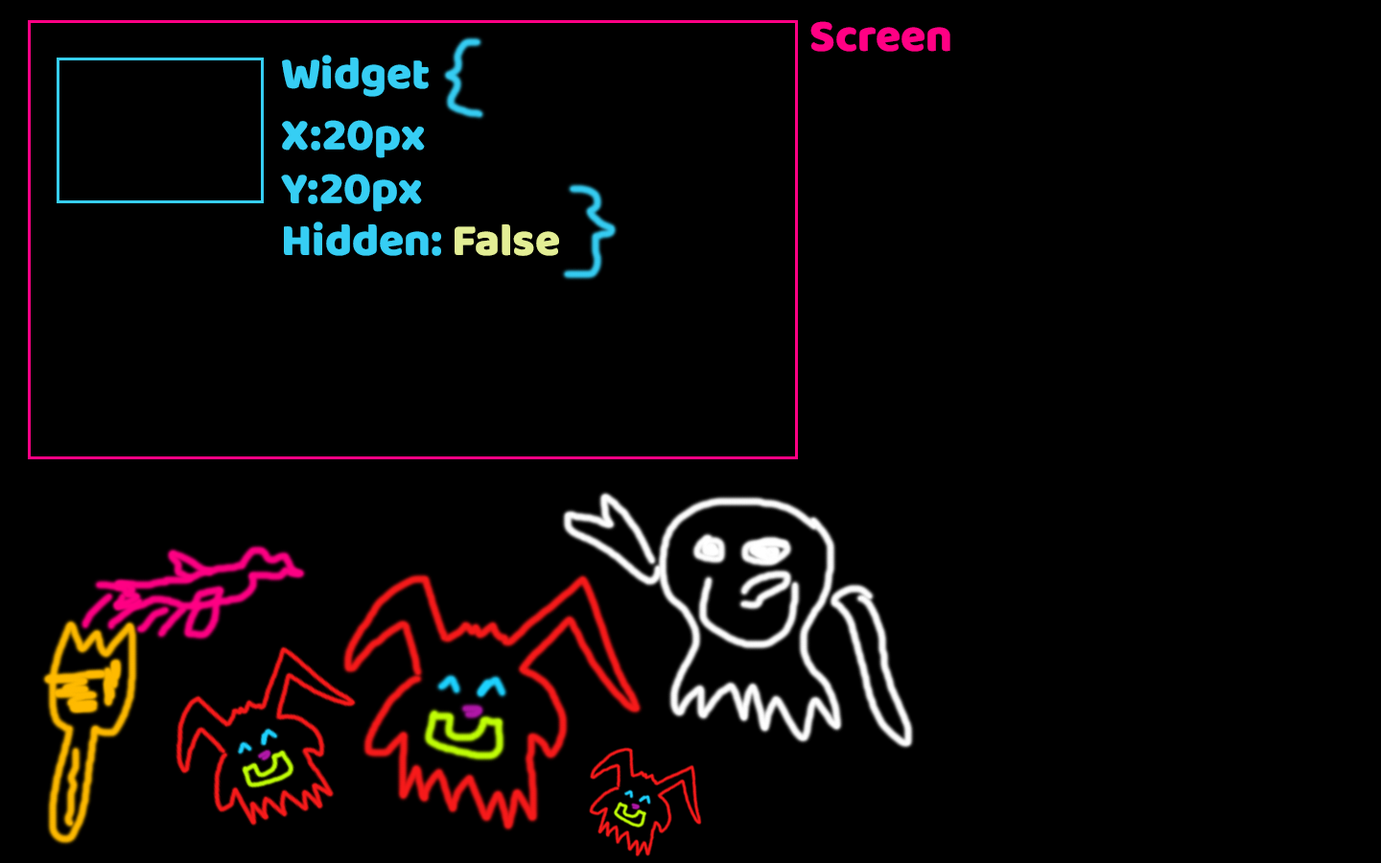
<style>
.page{position:relative;width:1381px;height:863px;background:#000000}
.page>*{position:absolute;margin:0}
.t1{font:46px "BalooBhaijaan-Regular";color:#ff0084}
.t2{font:46px "BalooBhaijaan-Regular";color:#36cef4}
.t3{font:46px "BalooBhaijaan-Regular";color:#e3ee95}
</style>
<div class="page">
<p class="t1" style="left:811px;top:21px;width:140px;height:31px">Screen</p>
<p class="t2" style="left:282px;top:55px;width:147px;height:42px">Widget</p>
<p class="t2" style="left:282px;top:120px;width:143px;height:38px">X:20px</p>
<p class="t2" style="left:281px;top:174px;width:141px;height:38px">Y:20px</p>
<p class="t2" style="left:284px;top:222px;width:275px;height:34px">Hidden: <span class="t3">False</span></p>
</div>
